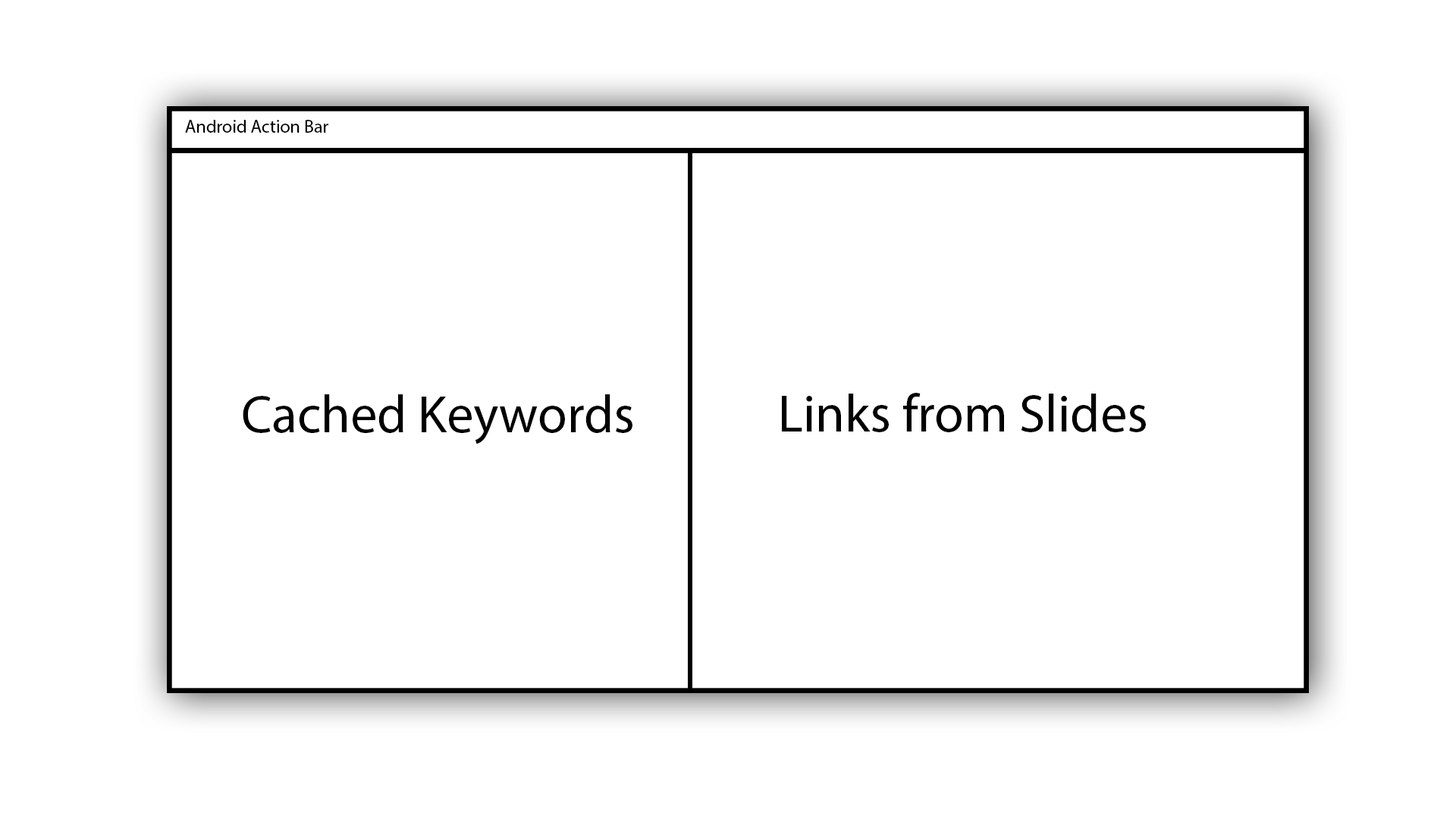
<style>
.page{position:relative;width:1456px;height:819px;background:#ffffff}
.page>*{position:absolute;margin:0}
.t1{font:18.2px "MyriadPro-Regular";color:#000000}
.t2{font:53.1px "MyriadPro-Regular";color:#000000}
</style>
<div class="page">
<p class="t1" style="left:185px;top:120px;width:143px;height:13px">Android Action Bar</p>
<p class="t2" style="left:243px;top:394px;width:389px;height:50px">Cached Keywords</p>
<p class="t2" style="left:782px;top:393px;width:364px;height:39px">Links from Slides</p>
</div>
